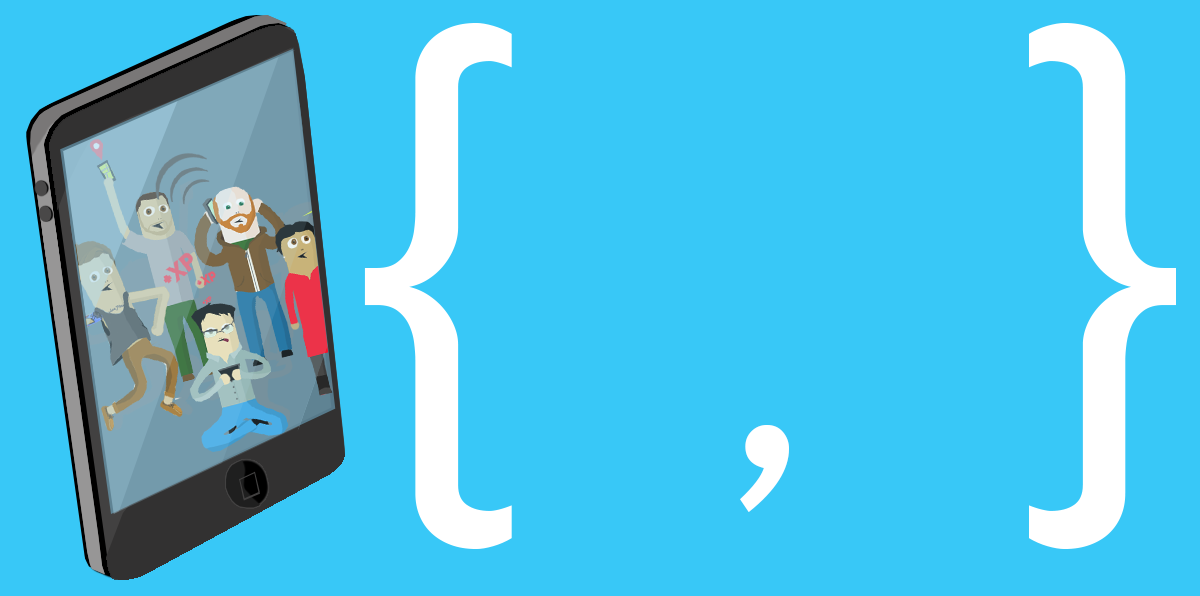
<style>
.page{position:relative;width:1200px;height:596px;background:#38c8f7}
.page>*{position:absolute;margin:0}
.t1{font:337.5px "GloucesterMT-ExtraCondensed";color:#ffffff}
</style>
<div class="page">
<p class="t1" style="left:740px;top:425px;width:49px;height:87px">,</p>
</div>
